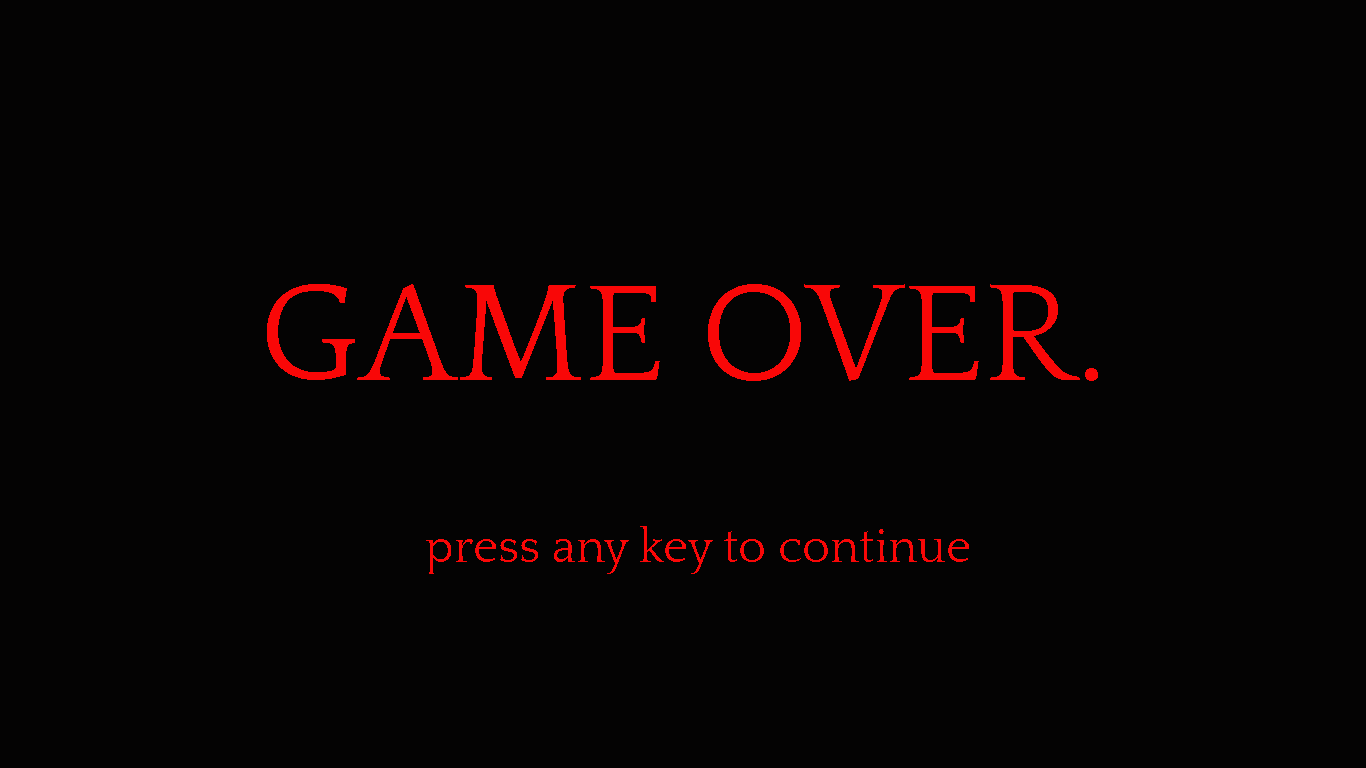
<style>
.page{position:relative;width:1366px;height:768px;background:#040303}
.page>*{position:absolute;margin:0}
.t1{font:142.6px "Quattrocento";color:#f90707}
.t2{font:48px "Quattrocento";color:#f90707}
</style>
<div class="page">
<p class="t1" style="left:267px;top:284px;width:831px;height:97px">GAME OVER.</p>
<p class="t2" style="left:426px;top:526px;width:543px;height:48px">press any key to continue</p>
</div>
